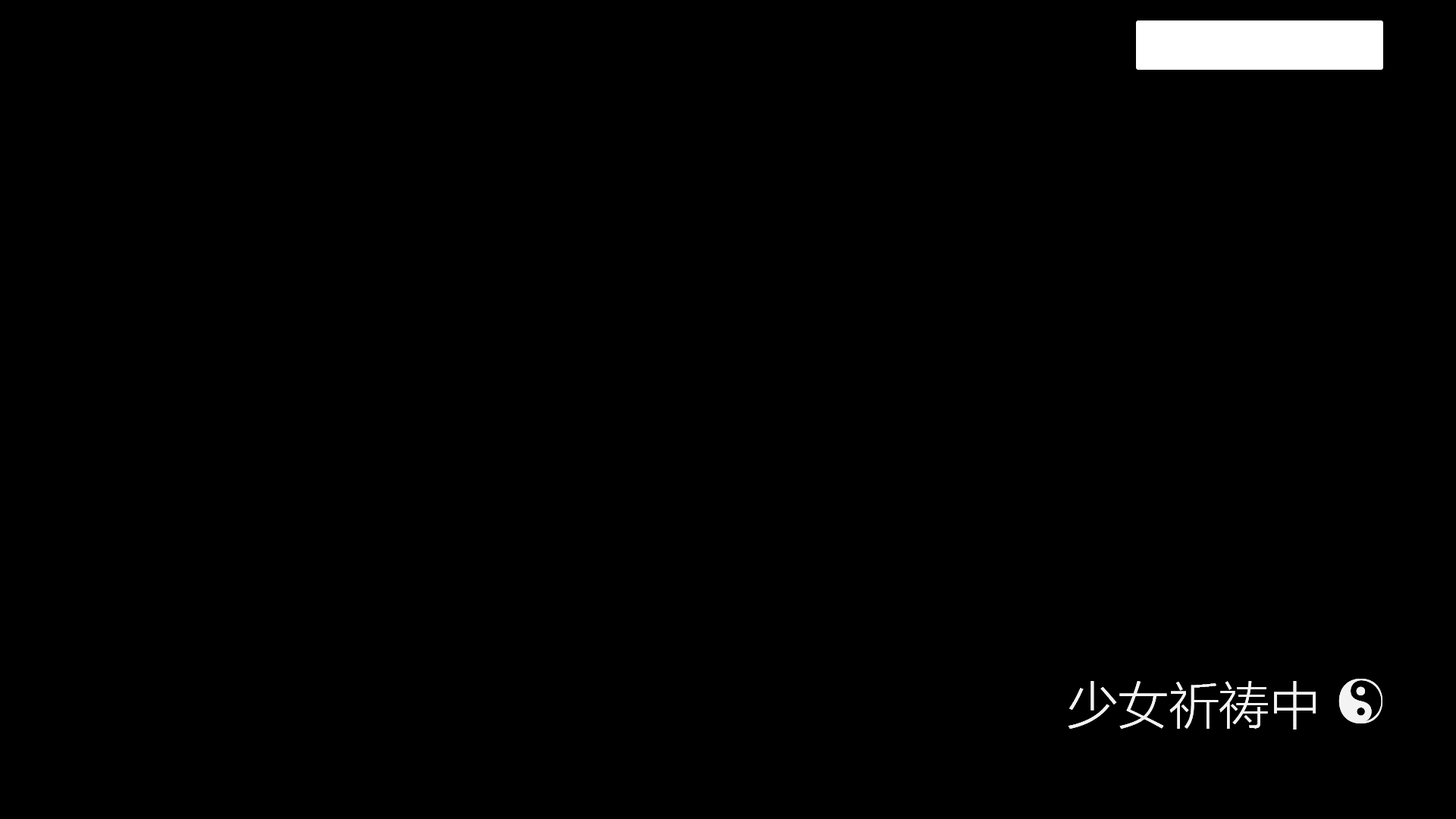
<style>
.page{position:relative;width:1456px;height:819px;background:#000000}
.page>*{position:absolute;margin:0}
.t1{font:50.6px "MicrosoftYaHeiUILight";color:#f3f3f3}
.t2{font:63.2px "REIMU-Roman";color:#f3f3f3}
</style>
<div class="page">
<p class="t1" style="left:1068px;top:679px;width:314px;height:51px">少女祈祷中 <span class="t2">O</span></p>
<p class="t1" style="left:1068px;top:679px;width:314px;height:51px">少女祈祷中 <span class="t2">O</span></p>
</div>
